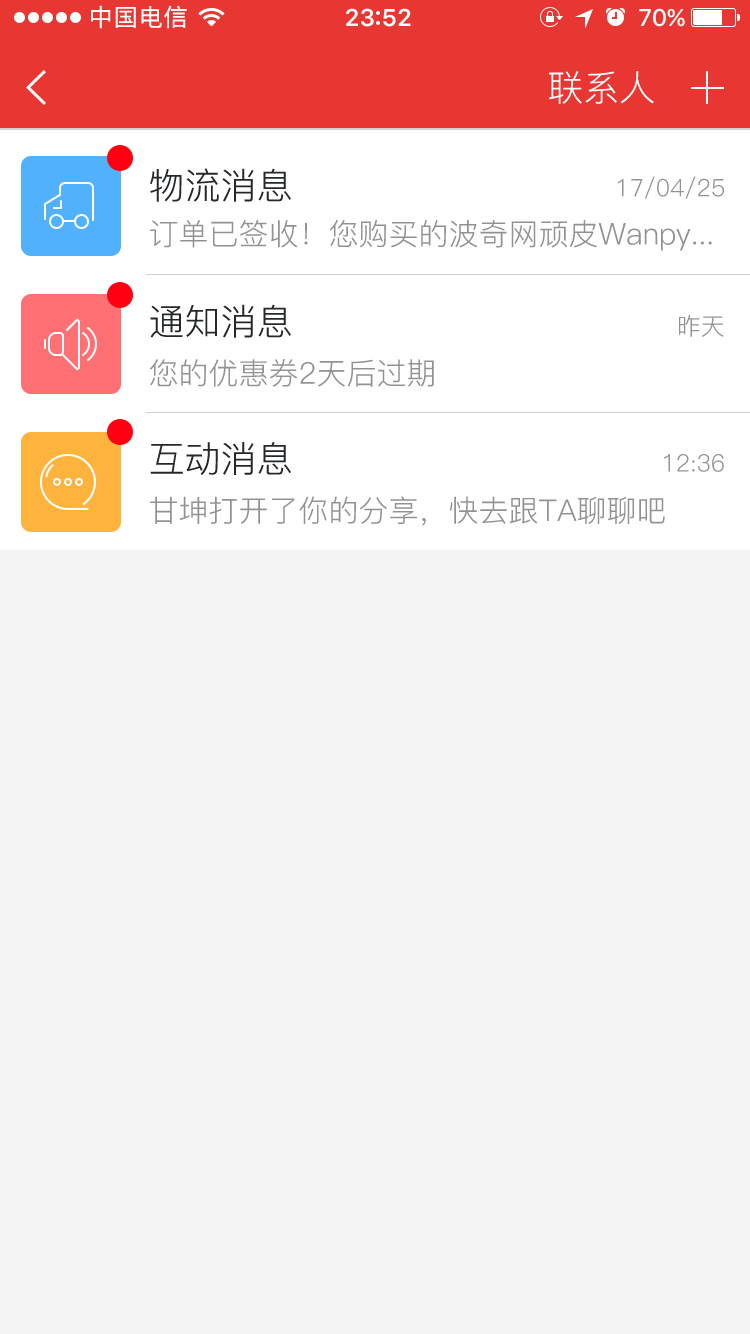
<style>
.page{position:relative;width:750px;height:1334px;background:#f4f4f4}
.page>*{position:absolute;margin:0}
.t1{font:36px "PingFang-SC-Regular";color:#feffff}
.t2{font:36px "PingFang-SC-Regular";color:#25282a}
.t3{font:24px "PingFang-SC-Regular";color:#929292}
.t4{font:30px "PingFang-SC-Regular";color:#929292}
</style>
<div class="page">
<p class="t1" style="left:549px;top:71px;width:105px;height:33px">联系人</p>
<p class="t2" style="left:150px;top:168px;width:141px;height:34px">物流消息</p>
<p class="t3" style="left:617px;top:176px;width:107px;height:23px">17/04/25</p>
<p class="t4" style="left:150px;top:220px;width:562px;height:31px">订单已签收！您购买的波奇网顽皮Wanpy...</p>
<p class="t2" style="left:150px;top:304px;width:141px;height:34px">通知消息</p>
<p class="t3" style="left:679px;top:315px;width:45px;height:22px">昨天</p>
<p class="t4" style="left:150px;top:359px;width:284px;height:28px">您的优惠券2天后过期</p>
<p class="t2" style="left:150px;top:442px;width:141px;height:33px">互动消息</p>
<p class="t3" style="left:664px;top:454px;width:60px;height:18px">12:36</p>
<p class="t4" style="left:150px;top:496px;width:515px;height:30px">甘坤打开了你的分享，快去跟TA聊聊吧</p>
</div>
